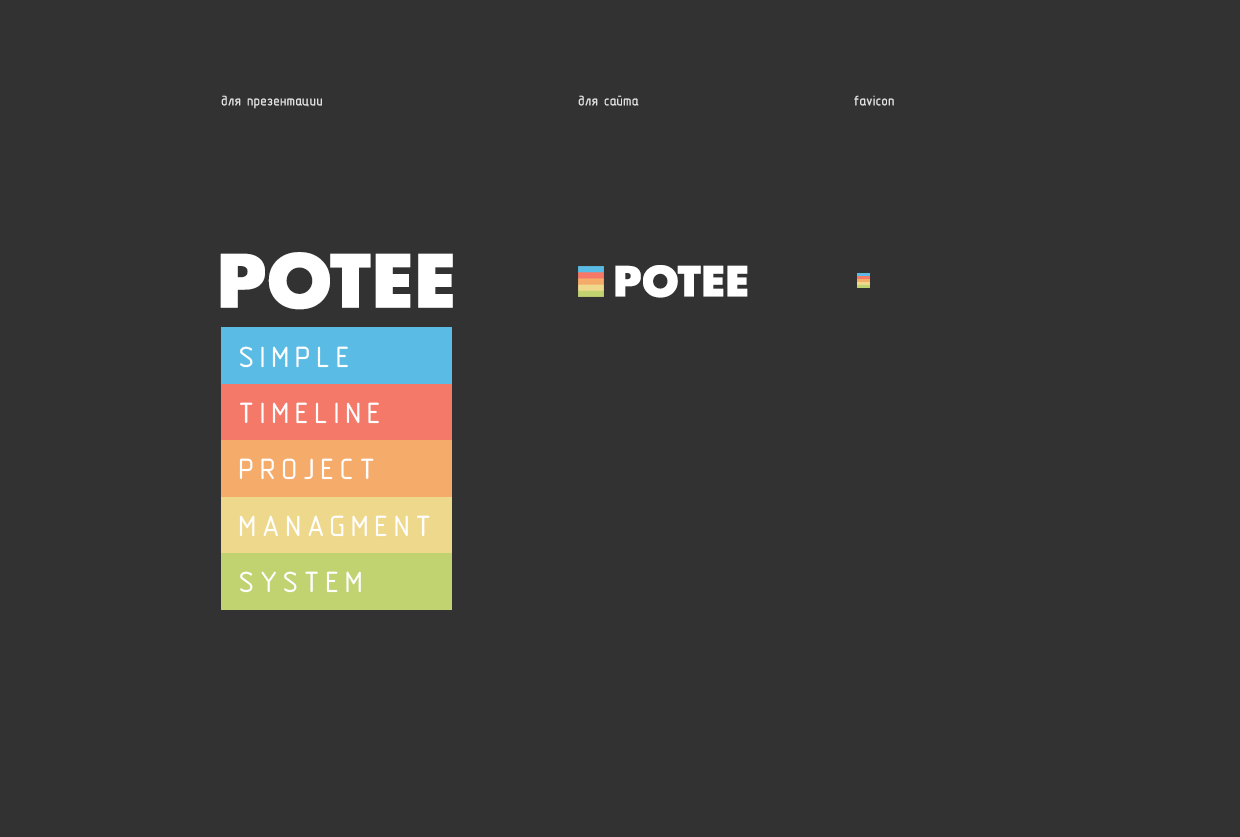
<style>
.page{position:relative;width:1240px;height:837px;background:#323232}
.page>*{position:absolute;margin:0}
.t1{font:14px "GOST-2.304-81typeB";color:#e1e1e1}
.t2{font:71.4px "AFuturicaBlack";color:#ffffff;text-transform:uppercase}
.t3{font:40.4px "AFuturicaBlack";color:#ffffff;text-transform:uppercase}
.t4{font:29.5px/56.1px "GOST-2.304-81typeB";letter-spacing:0.18em;color:#ffffff;text-transform:uppercase}
</style>
<div class="page">
<p class="t1" style="left:221px;top:95px;width:101px;height:14px">для презентации</p>
<p class="t1" style="left:578px;top:95px;width:61px;height:11px">для сайта</p>
<p class="t1" style="left:854px;top:95px;width:40px;height:11px">favicon</p>
<p class="t2" style="left:220px;top:252px;width:233px;height:58px">Potee</p>
<p class="t3" style="left:615px;top:265px;width:133px;height:33px">Potee</p>
<p class="t4" style="left:239px;top:346px;width:191px;height:247px">simple <br>timeline<br>project <br>managment <br>system</p>
</div>
